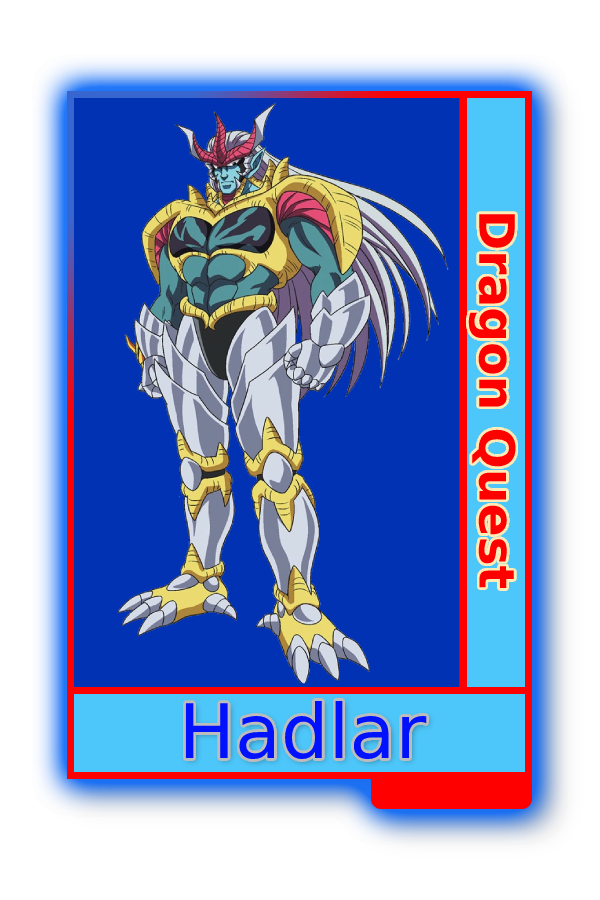
<style>
.page{position:relative;width:600px;height:900px;background:#0032b3}
.page>*{position:absolute;margin:0}
.t1{font:48.8px "MADETOMMY-Bold";color:#ff0000}
.t2{font:75px "CoolveticaRg-Regular";color:#0011fd}
</style>
<div class="page">
<p class="t1" style="left:468px;top:214px;width:48px;height:374px;rotate:90deg">Dragon Quest</p>
<p class="t2" style="left:185px;top:701px;width:242px;height:59px">Hadlar</p>
</div>
